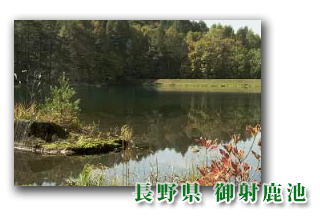
<style>
.page{position:relative;width:320px;height:216px;background:#ffffff}
.page>*{position:absolute;margin:0}
.t1{font:20px "KozMinPr6N-Heavy";letter-spacing:0.2em;color:#03751b}
</style>
<div class="page">
<p class="t1" style="left:133px;top:182px;width:173px;height:20px">長野県 御射鹿池</p>
</div>
